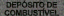
<style>
.page{position:relative;width:64px;height:16px}
.page>*{position:absolute;margin:0}
.t1{font:8px/8px "Arial-BoldMT";letter-spacing:-0.04em;color:#191511}
</style>
<div class="page">
<p class="t1" style="left:4px;top:0px;width:56px;height:16px;text-align:center">DEPÓSITO DE<br>COMBUSTÍVEL</p>
</div>
